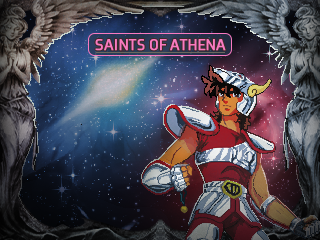
<style>
.page{position:relative;width:320px;height:240px}
.page>*{position:absolute;margin:0}
.t1{font:15px "Axia-Regular";color:#f97ac2;font-weight:bold}
</style>
<div class="page">
<p class="t1" style="left:95px;top:39px;width:131px;height:12px">SAINTS OF ATHENA</p>
<p class="t1" style="left:95px;top:39px;width:131px;height:12px">SAINTS OF ATHENA</p>
</div>
